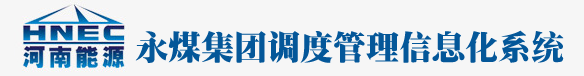
<style>
.page{position:relative;width:584px;height:76px;background:#f6f6f6}
.page>*{position:absolute;margin:0}
.t1{font:33px "SungtiEG-Ultra-?";color:#045799}
</style>
<div class="page">
<p class="t1" style="left:135px;top:30px;width:429px;height:33px">永煤集团调度管理信息化系统</p>
</div>
